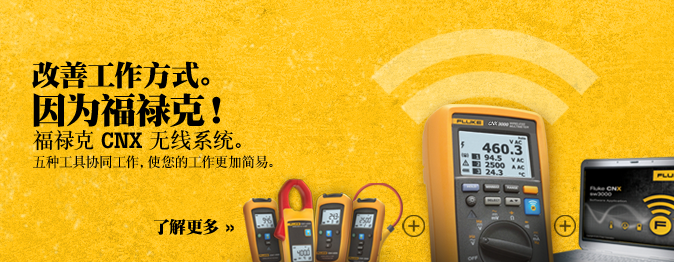
<style>
.page{position:relative;width:674px;height:262px}
.page>*{position:absolute;margin:0}
.t1{font:29px "DFPSongW12";letter-spacing:-0.005em;color:#000000;text-transform:uppercase}
.t2{font:36px "DFPSongW12";letter-spacing:-0.005em;color:#000000;text-transform:uppercase}
.t3{font:14px/18.8px "DFPSongW7";letter-spacing:-0.01em;color:#000000}
.t4{font:22px/18.8px "DFPSongW7";letter-spacing:-0.01em;color:#000000}
.t5{font:22px/18.8px "BotonPro-Medium";letter-spacing:-0.01em;color:#000000}
.t6{font:17px "DFPSongW12";letter-spacing:-0.01em;color:#000000}
.t7{font:17px "HelveticaNeueLTStd-BdEx";letter-spacing:-0.01em;color:#000000}
</style>
<div class="page">
<p class="t1" style="left:32px;top:61px;width:178px;height:28px">改善工作方式。</p>
<p class="t2" style="left:33px;top:93px;width:188px;height:34px">因为福禄克！</p>
<p class="t3" style="left:33px;top:129px;width:240px;height:40px"><span class="t4">福禄克</span><span class="t5"> CNX </span><span class="t4">无线系统。<br></span>五种工具协同工作，使您的工作更加简易。</p>
<p class="t6" style="left:154px;top:219px;width:80px;height:16px">了解更多<span class="t7"> »</span></p>
</div>
